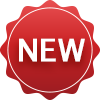
<style>
.page{position:relative;width:100px;height:100px;background:#ffffff}
.page>*{position:absolute;margin:0}
.t1{font:41.4px "AppleSymbols";color:#ffffff;font-weight:bold}
</style>
<div class="page">
<p class="t1" style="left:19px;top:38px;width:66px;height:24px">NEW</p>
</div>
